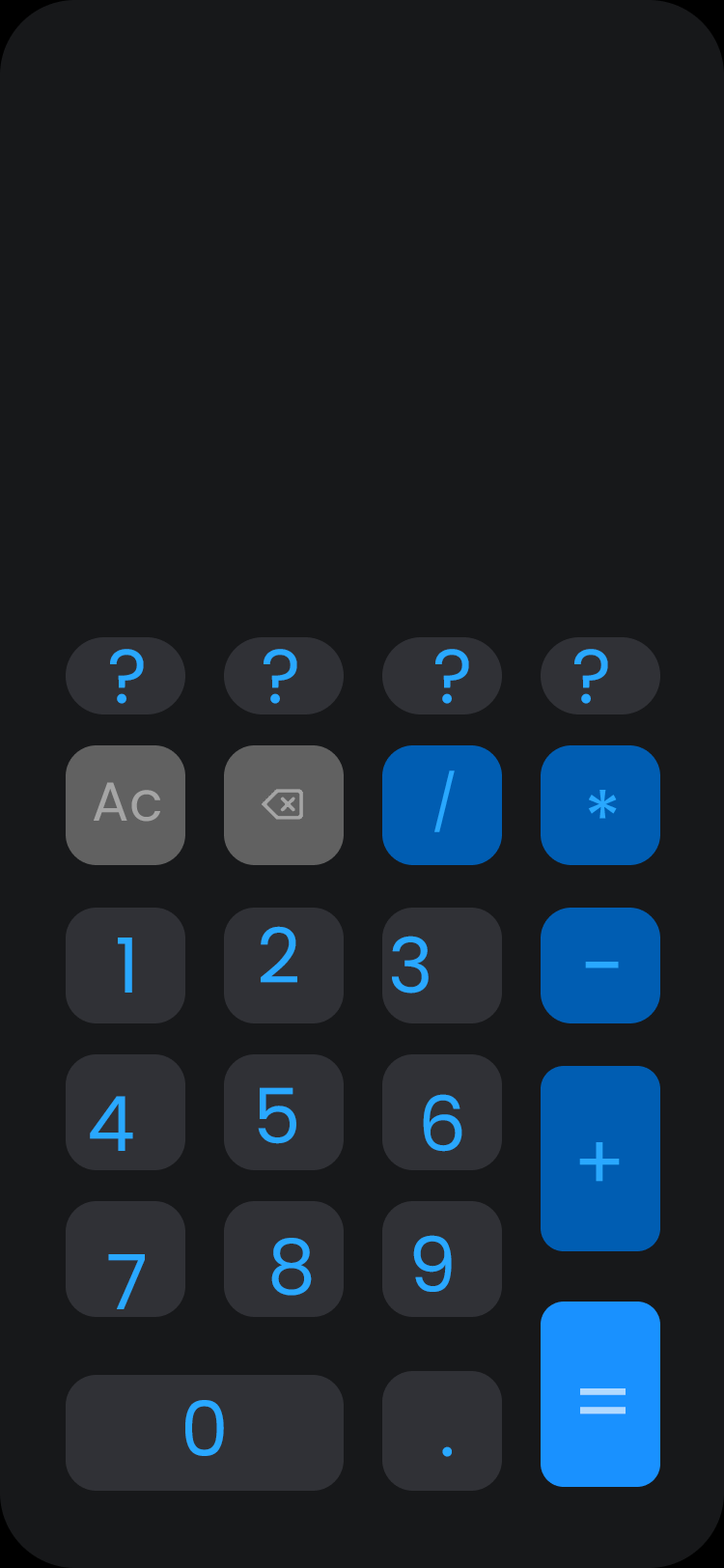
<style>
.page{position:relative;width:724px;height:1568px;background:#17181a}
.page>*{position:absolute;margin:0}
.t1{font:76.3px "Poppins-Regular";color:#29a8ff}
.t2{font:55px "Poppins-Regular";color:#29a8ff}
.t3{font:55px "Poppins-Regular";color:#a5a5a5}
.t4{font:81.1px "Poppins-Regular";color:#29a8ff}
.t5{font:86.9px "Poppins-Regular";color:#b2daff}
</style>
<div class="page">
<p class="t1" style="left:110px;top:649px;width:34px;height:55px">?</p>
<p class="t1" style="left:264px;top:649px;width:33px;height:55px">?</p>
<p class="t1" style="left:435px;top:649px;width:34px;height:55px">?</p>
<p class="t1" style="left:574px;top:649px;width:34px;height:55px">?</p>
<p class="t2" style="left:434px;top:770px;width:21px;height:62px">/</p>
<p class="t3" style="left:94px;top:782px;width:66px;height:40px">Ac</p>
<p class="t1" style="left:588px;top:790px;width:29px;height:29px">*</p>
<p class="t1" style="left:261px;top:926px;width:36px;height:57px">2</p>
<p class="t1" style="left:118px;top:938px;width:14px;height:55px">1</p>
<p class="t1" style="left:392px;top:936px;width:37px;height:58px">3</p>
<p class="t4" style="left:585px;top:962px;width:34px;height:6px">-</p>
<p class="t1" style="left:90px;top:1096px;width:43px;height:55px">4</p>
<p class="t1" style="left:258px;top:1087px;width:38px;height:57px">5</p>
<p class="t1" style="left:423px;top:1094px;width:39px;height:58px">6</p>
<p class="t1" style="left:579px;top:1142px;width:41px;height:40px">+</p>
<p class="t1" style="left:271px;top:1238px;width:41px;height:58px">8v</p>
<p class="t1" style="left:413px;top:1235px;width:39px;height:57px">9v</p>
<p class="t1" style="left:108px;top:1254px;width:37px;height:55px">7</p>
<p class="t5" style="left:580px;top:1388px;width:46px;height:26px">=</p>
<p class="t1" style="left:185px;top:1400px;width:39px;height:56px">0</p>
<p class="t1" style="left:442px;top:1446px;width:10px;height:11px">.</p>
</div>
